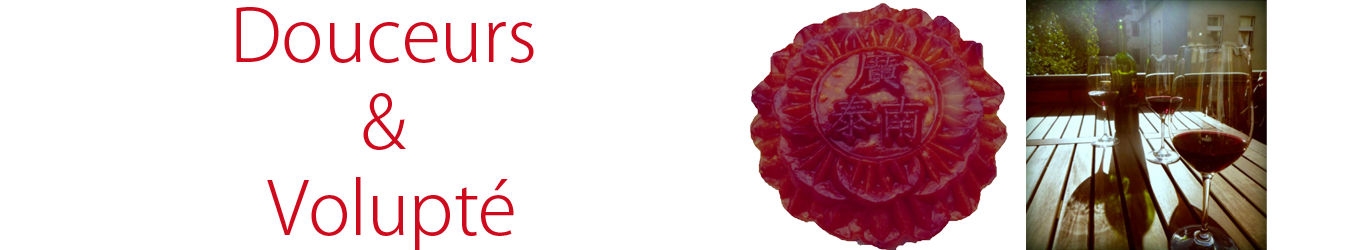
<style>
.page{position:relative;width:1349px;height:250px;background:#ffffff}
.page>*{position:absolute;margin:0}
.t1{font:72px "KozGoPro-Light";color:#cf0a1d}
</style>
<div class="page">
<p class="t1" style="left:236px;top:7px;width:298px;height:244px;text-align:center">Douceurs <br>&amp; <br>Volupté</p>
</div>
